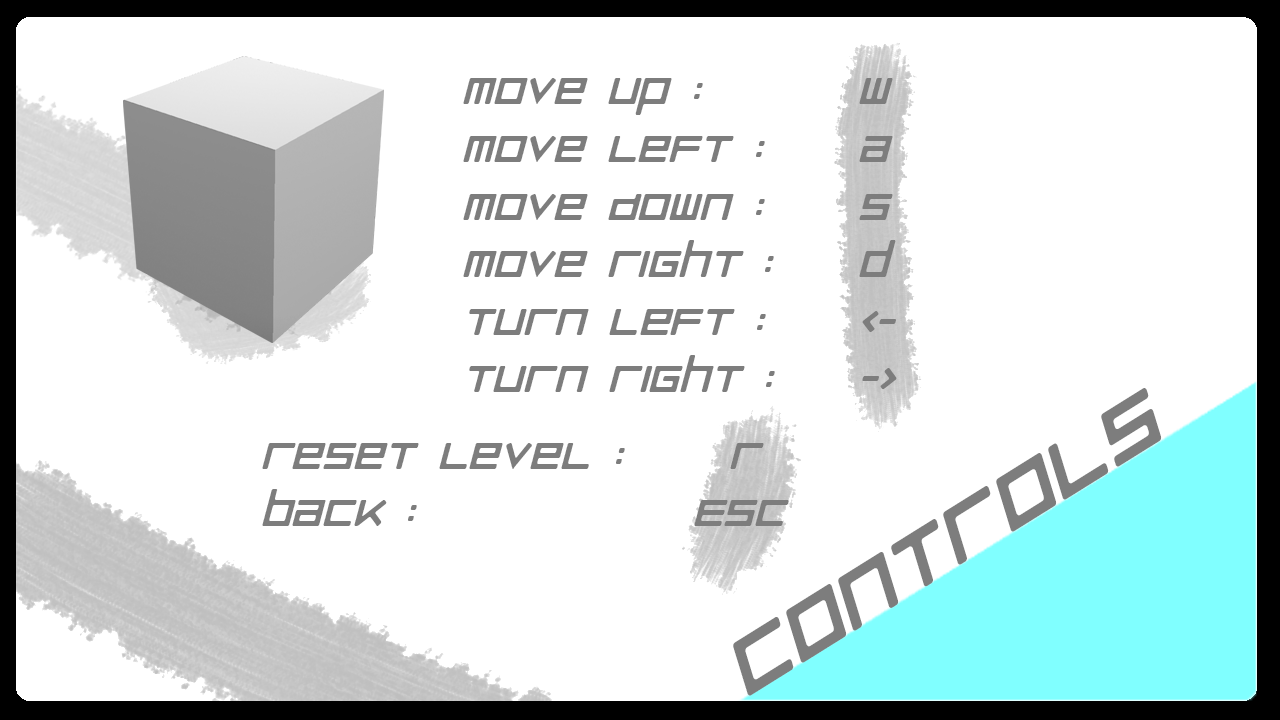
<style>
.page{position:relative;width:1280px;height:720px;background:#ffffff}
.page>*{position:absolute;margin:0}
.t1{font:48px "LuggageRoundRegularOblique";color:#7d7d7d}
.t2{font:96px "LuggageRoundRegularOblique";color:#7d7d7d}
</style>
<div class="page">
<p class="t1" style="left:463px;top:78px;width:434px;height:314px;text-align:right">Move up :     w<br>Move Left :   a<br>Move Down :   s<br>Move Right :   d<br>Turn Left :   &lt;- <br>Turn Right :   -&gt;</p>
<p class="t2" style="left:733px;top:388px;width:429px;height:308px;rotate:-32deg">Controls</p>
<p class="t1" style="left:262px;top:443px;width:527px;height:83px;text-align:right">Reset Level :    R<br>Back :        Esc</p>
</div>
